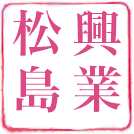
<style>
.page{position:relative;width:134px;height:134px;background:#ffffff}
.page>*{position:absolute;margin:0}
.t1{font:12px "HiraMinProN-W6";color:#db4987}
</style>
<div class="page">
<p class="t1" style="left:12px;top:9px;width:50px;height:47px">松</p>
<p class="t1" style="left:73px;top:10px;width:48px;height:46px">興</p>
<p class="t1" style="left:16px;top:65px;width:44px;height:48px">島</p>
<p class="t1" style="left:73px;top:65px;width:49px;height:47px">業</p>
</div>
